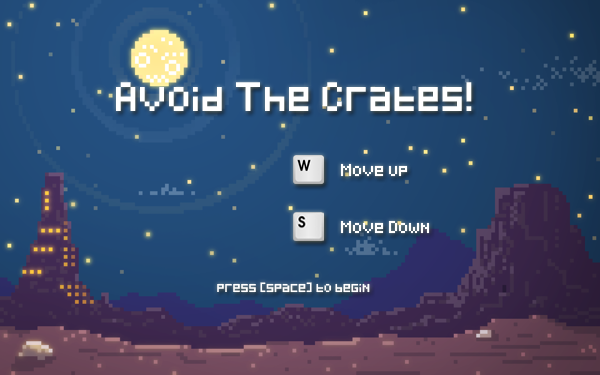
<style>
.page{position:relative;width:600px;height:375px}
.page>*{position:absolute;margin:0}
.t1{font:24px "Pixeled";color:#ffffff}
.t2{font:10px "Pixeled";color:#ffffff}
.t3{font:8px "Pixeled";color:#ffffff}
</style>
<div class="page">
<p class="t1" style="left:116px;top:82px;width:356px;height:29px">Avoid The Crates!</p>
<p class="t2" style="left:340px;top:163px;width:68px;height:14px">Move up</p>
<p class="t2" style="left:340px;top:220px;width:90px;height:14px">Move Down</p>
<p class="t3" style="left:217px;top:282px;width:153px;height:11px">press [space] to begin</p>
</div>
